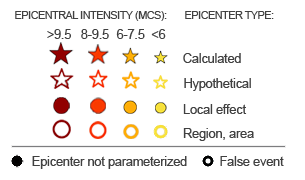
<style>
.page{position:relative;width:305px;height:180px;background:#ffffff}
.page>*{position:absolute;margin:0}
.t1{font:10.5px "ArialMT";letter-spacing:-0.025em;color:#404040}
.t2{font:12.8px "ArialMT";letter-spacing:-0.015em;color:#404040}
</style>
<div class="page">
<p class="t1" style="left:15px;top:11px;width:152px;height:10px">EPICENTRAL INTENSITY (MCS):</p>
<p class="t1" style="left:185px;top:11px;width:89px;height:8px">EPICENTER TYPE:</p>
<p class="t2" style="left:47px;top:29px;width:24px;height:10px">&gt;9.5</p>
<p class="t2" style="left:81px;top:29px;width:28px;height:10px">8-9.5</p>
<p class="t2" style="left:116px;top:29px;width:29px;height:10px">6-7.5</p>
<p class="t2" style="left:151px;top:29px;width:15px;height:10px">&lt;6</p>
<p class="t2" style="left:183px;top:53px;width:58px;height:10px">Calculated</p>
<p class="t2" style="left:184px;top:78px;width:67px;height:13px">Hypothetical</p>
<p class="t2" style="left:183px;top:104px;width:64px;height:10px">Local effect</p>
<p class="t2" style="left:183px;top:128px;width:71px;height:13px">Region, area</p>
<p class="t2" style="left:32px;top:156px;width:155px;height:13px">Epicenter not parameterized</p>
<p class="t2" style="left:220px;top:156px;width:64px;height:10px">False event</p>
</div>
